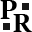
<style>
.page{position:relative;width:32px;height:32px;background:#ffffff}
.page>*{position:absolute;margin:0}
.t1{font:28px "Constantia-Bold";color:#000000}
.t2{font:26.7px "Constantia-Bold";color:#000000}
</style>
<div class="page">
<p class="t1" style="left:0px;top:0px;width:17px;height:19px">P</p>
<p class="t2" style="left:13px;top:14px;width:19px;height:18px">R</p>
</div>
